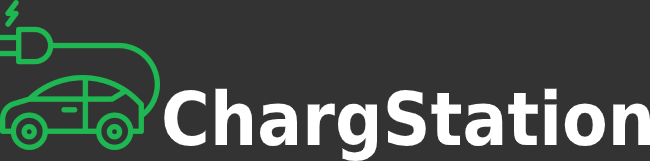
<style>
.page{position:relative;width:650px;height:161px;background:#333333}
.page>*{position:absolute;margin:0}
.t1{font:74px "DejaVuSansCondensed-Bold";color:#ffffff}
</style>
<div class="page">
<p class="t1" style="left:164px;top:88px;width:486px;height:73px">ChargStation</p>
</div>
